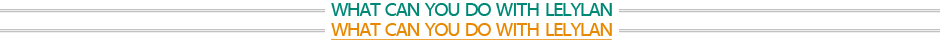
<style>
.page{position:relative;width:940px;height:40px;background:#ffffff}
.page>*{position:absolute;margin:0}
.t1{font:20px "MyriadWebPro";letter-spacing:-0.075em;color:#008877}
.t2{font:20px "MyriadWebPro";letter-spacing:-0.035em;color:#008877}
.t3{font:20px "MyriadWebPro";letter-spacing:-0.075em;color:#e88801;text-decoration:underline}
.t4{font:20px "MyriadWebPro";letter-spacing:-0.035em;color:#e88801;text-decoration:underline}
</style>
<div class="page">
<p class="t1" style="left:331px;top:3px;width:281px;height:13px">WHAT  CAN  YOU  DO  <span class="t2">WITH</span>  LELYLAN</p>
<p class="t3" style="left:331px;top:23px;width:281px;height:18px">WHAT  CAN  YOU  DO  <span class="t4">WITH</span>  LELYLAN</p>
</div>
